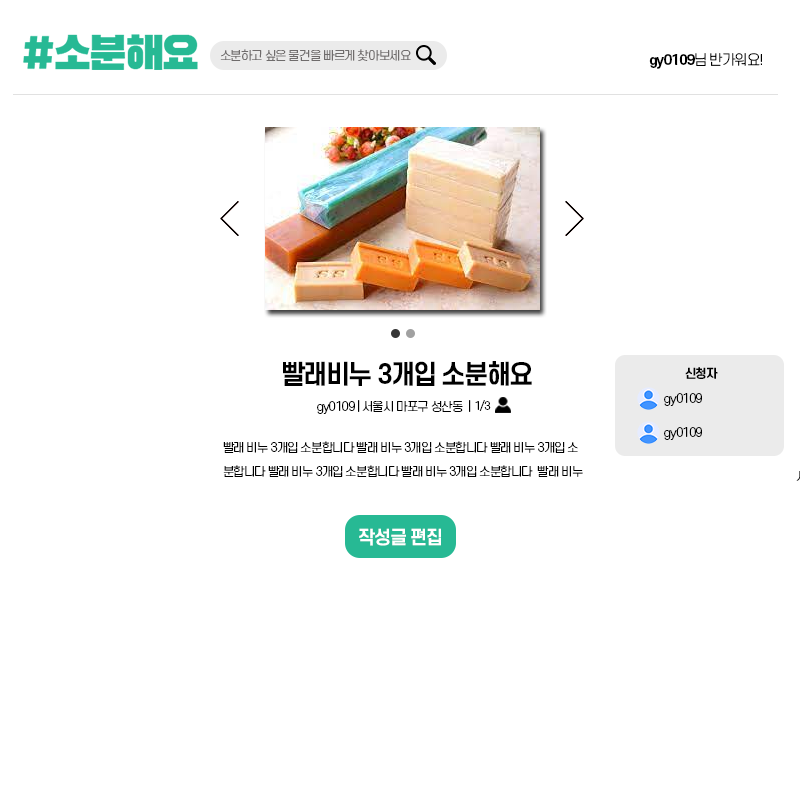
<style>
.page{position:relative;width:800px;height:800px;background:#ffffff}
.page>*{position:absolute;margin:0}
.t1{font:12px "S-CoreDream-3Light";letter-spacing:-0.075em;color:#6f6c6c}
.t2{font:14px "S-CoreDream-3Light";letter-spacing:-0.075em;color:#000000}
.t3{font:14px "S-CoreDream-6Bold";letter-spacing:-0.075em;color:#000000}
.t4{font:26.1px "S-CoreDream-6Bold";letter-spacing:-0.075em;color:#000000}
.t5{font:12.1px "S-CoreDream-6Bold";letter-spacing:-0.075em;color:#000000}
.t6{font:12px "S-CoreDream-3Light";letter-spacing:-0.075em;color:#000000}
.t7{font:11.2px "S-CoreDream-3Light";letter-spacing:-0.075em;color:#000000}
.t8{font:12.1px "S-CoreDream-3Light";letter-spacing:-0.075em;color:#000000}
.t9{font:12px/24px "S-CoreDream-3Light";letter-spacing:-0.075em;color:#000000}
.t10{font:18px "S-CoreDream-6Bold";letter-spacing:-0.075em;color:#ffffff}
</style>
<div class="page">
<p class="t1" style="left:220px;top:49px;width:191px;height:12px">소분하고 싶은 물건을 빠르게 찾아보세요</p>
<p class="t2" style="left:649px;top:53px;width:113px;height:16px"><span class="t3">gy0109</span>님 반가워요!</p>
<p class="t4" style="left:283px;top:361px;width:249px;height:25px">빨래비누 3개입 소분해요</p>
<p class="t5" style="left:685px;top:367px;width:33px;height:12px">신청자</p>
<p class="t6" style="left:317px;top:400px;width:154px;height:14px">gy0109 | 서울시 마포구 성산동  |</p>
<p class="t7" style="left:475px;top:400px;width:16px;height:11px">1/3</p>
<p class="t8" style="left:664px;top:393px;width:38px;height:13px">gy0109</p>
<p class="t8" style="left:664px;top:427px;width:38px;height:13px">gy0109</p>
<p class="t9" style="left:223px;top:441px;width:360px;height:36px">빨래 비누 3개입 소분합니다 빨래 비누 3개입 소분합니다 빨래 비누 3개입 소<br>분합니다 빨래 비누 3개입 소분합니다 빨래 비누 3개입 소분합니다  빨래 비누</p>
<p class="t10" style="left:359px;top:528px;width:82px;height:18px">작성글 편집</p>
</div>
